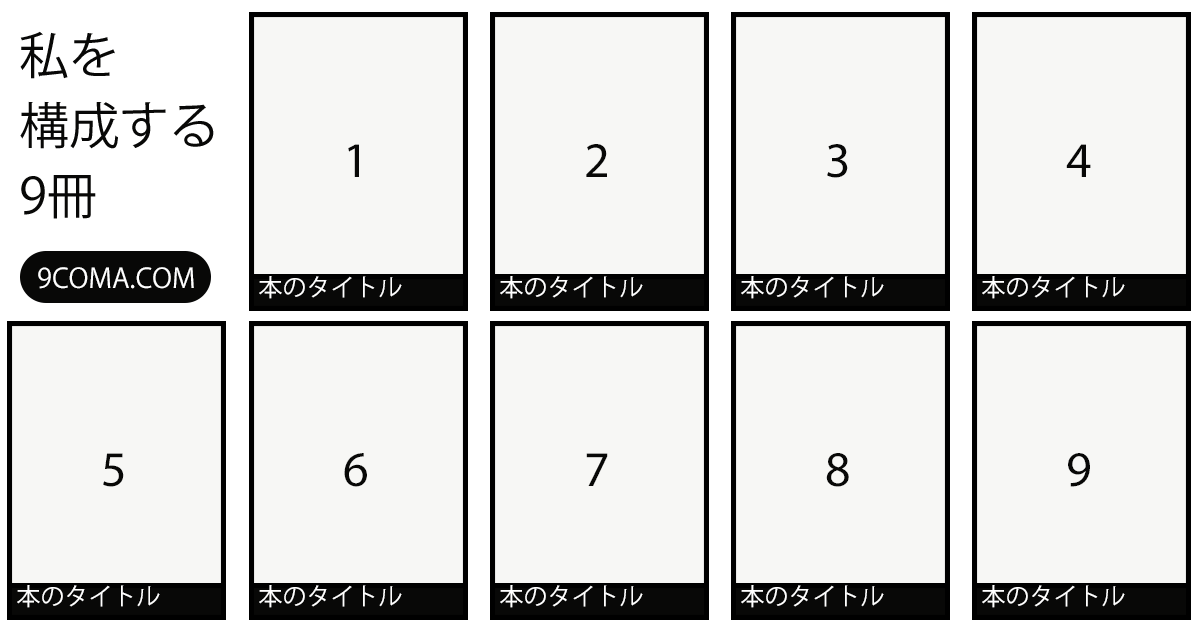
<style>
.page{position:relative;width:1200px;height:630px;background:#f7f7f5}
.page>*{position:absolute;margin:0}
.t1{font:50px/70px "KozGoPr6N-Regular";color:#080807}
.t2{font:50px "MyriadPro-Regular";color:#080807}
.t3{font:27px "KozGoPr6N-Regular";color:#ffffff}
.t4{font:24px "KozGoPr6N-Regular";color:#ffffff}
</style>
<div class="page">
<p class="t1" style="left:20px;top:31px;width:194px;height:188px">私を<br>構成する<br>9冊</p>
<p class="t2" style="left:348px;top:144px;width:11px;height:33px">1</p>
<p class="t2" style="left:586px;top:144px;width:21px;height:33px">2</p>
<p class="t2" style="left:827px;top:144px;width:21px;height:34px">3</p>
<p class="t2" style="left:1066px;top:144px;width:25px;height:33px">4</p>
<p class="t3" style="left:38px;top:267px;width:156px;height:22px">9COMA.COM</p>
<p class="t4" style="left:259px;top:276px;width:143px;height:23px">本のタイトル</p>
<p class="t4" style="left:500px;top:276px;width:143px;height:23px">本のタイトル</p>
<p class="t4" style="left:741px;top:276px;width:143px;height:23px">本のタイトル</p>
<p class="t4" style="left:982px;top:276px;width:143px;height:23px">本のタイトル</p>
<p class="t2" style="left:103px;top:453px;width:21px;height:34px">5</p>
<p class="t2" style="left:344px;top:453px;width:23px;height:34px">6</p>
<p class="t2" style="left:586px;top:453px;width:22px;height:33px">7</p>
<p class="t2" style="left:826px;top:453px;width:23px;height:34px">8</p>
<p class="t2" style="left:1068px;top:453px;width:22px;height:34px">9</p>
<p class="t4" style="left:17px;top:585px;width:143px;height:23px">本のタイトル</p>
<p class="t4" style="left:259px;top:585px;width:143px;height:23px">本のタイトル</p>
<p class="t4" style="left:500px;top:585px;width:143px;height:23px">本のタイトル</p>
<p class="t4" style="left:741px;top:585px;width:143px;height:23px">本のタイトル</p>
<p class="t4" style="left:982px;top:585px;width:143px;height:23px">本のタイトル</p>
</div>
